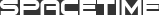
<style>
.page{position:relative;width:159px;height:15px;background:#ffffff}
.page>*{position:absolute;margin:0}
.t1{font:30px "Bitsumishi";color:#ffffff}
</style>
<div class="page">
<p class="t1" style="left:0px;top:0px;width:160px;height:15px">spacetime</p>
</div>
